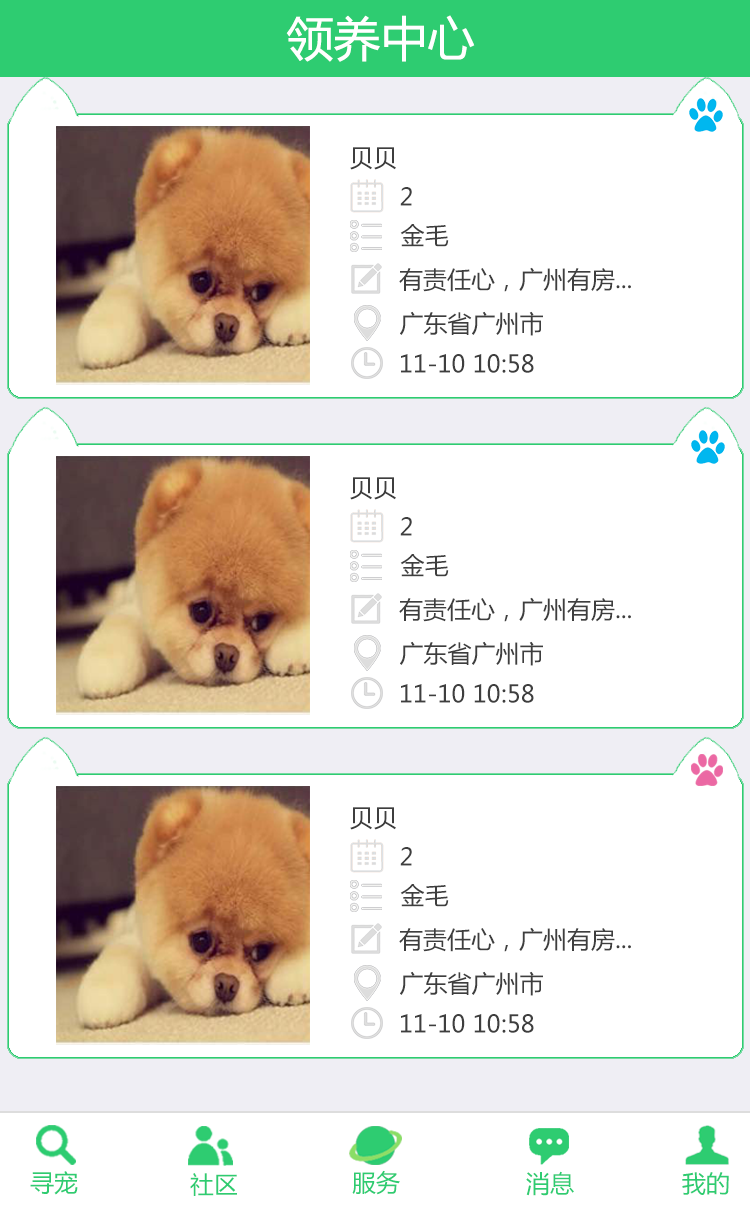
<style>
.page{position:relative;width:750px;height:1206px;background:#ffffff}
.page>*{position:absolute;margin:0}
.t1{font:47px "MicrosoftYaHei";color:#ffffff}
.t2{font:24px "MicrosoftYaHei";color:#3e3e3e}
.t3{font:24px "MicrosoftYaHei";color:#2ecc71}
.t4{font:24px "MicrosoftYaHei"}
</style>
<div class="page">
<p class="t1" style="left:286px;top:15px;width:189px;height:47px">领养中心</p>
<p class="t2" style="left:350px;top:147px;width:46px;height:23px">贝贝</p>
<p class="t2" style="left:400px;top:187px;width:12px;height:19px">2</p>
<p class="t2" style="left:400px;top:224px;width:49px;height:23px">金毛</p>
<p class="t2" style="left:399px;top:267px;width:232px;height:25px">有责任心，广州有房...</p>
<p class="t2" style="left:400px;top:311px;width:143px;height:25px">广东省广州市</p>
<p class="t2" style="left:401px;top:354px;width:133px;height:19px">11-10 10:58</p>
<p class="t2" style="left:350px;top:477px;width:46px;height:23px">贝贝</p>
<p class="t2" style="left:400px;top:517px;width:12px;height:19px">2</p>
<p class="t2" style="left:400px;top:554px;width:49px;height:23px">金毛</p>
<p class="t2" style="left:399px;top:597px;width:232px;height:25px">有责任心，广州有房...</p>
<p class="t2" style="left:400px;top:641px;width:143px;height:25px">广东省广州市</p>
<p class="t2" style="left:401px;top:684px;width:133px;height:19px">11-10 10:58</p>
<p class="t2" style="left:350px;top:807px;width:46px;height:23px">贝贝</p>
<p class="t2" style="left:400px;top:847px;width:12px;height:19px">2</p>
<p class="t2" style="left:400px;top:884px;width:49px;height:23px">金毛</p>
<p class="t2" style="left:399px;top:927px;width:232px;height:25px">有责任心，广州有房...</p>
<p class="t2" style="left:400px;top:971px;width:143px;height:25px">广东省广州市</p>
<p class="t2" style="left:401px;top:1014px;width:133px;height:19px">11-10 10:58</p>
<p class="t3" style="left:30px;top:1171px;width:48px;height:24px">寻宠</p>
<p class="t3" style="left:190px;top:1173px;width:47px;height:23px">社区</p>
<p class="t4" style="left:352px;top:1171px;width:48px;height:25px">服务</p>
<p class="t3" style="left:352px;top:1170px;width:48px;height:25px">服务</p>
<p class="t4" style="left:525px;top:1171px;width:48px;height:25px">消息</p>
<p class="t3" style="left:526px;top:1171px;width:48px;height:25px">消息</p>
<p class="t3" style="left:682px;top:1172px;width:47px;height:23px">我的</p>
<p class="t3" style="left:682px;top:1172px;width:47px;height:23px">我的</p>
</div>
